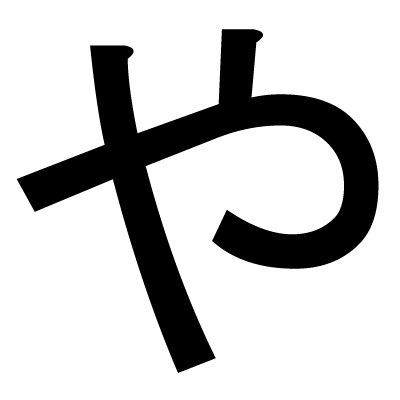
<style>
.page{position:relative;width:400px;height:400px;background:#ffffff}
.page>*{position:absolute;margin:0}
.t1{font:416.7px "MS-PGothic";color:#000000}
</style>
<div class="page">
<p class="t1" style="left:16px;top:29px;width:363px;height:344px">や</p>
</div>
